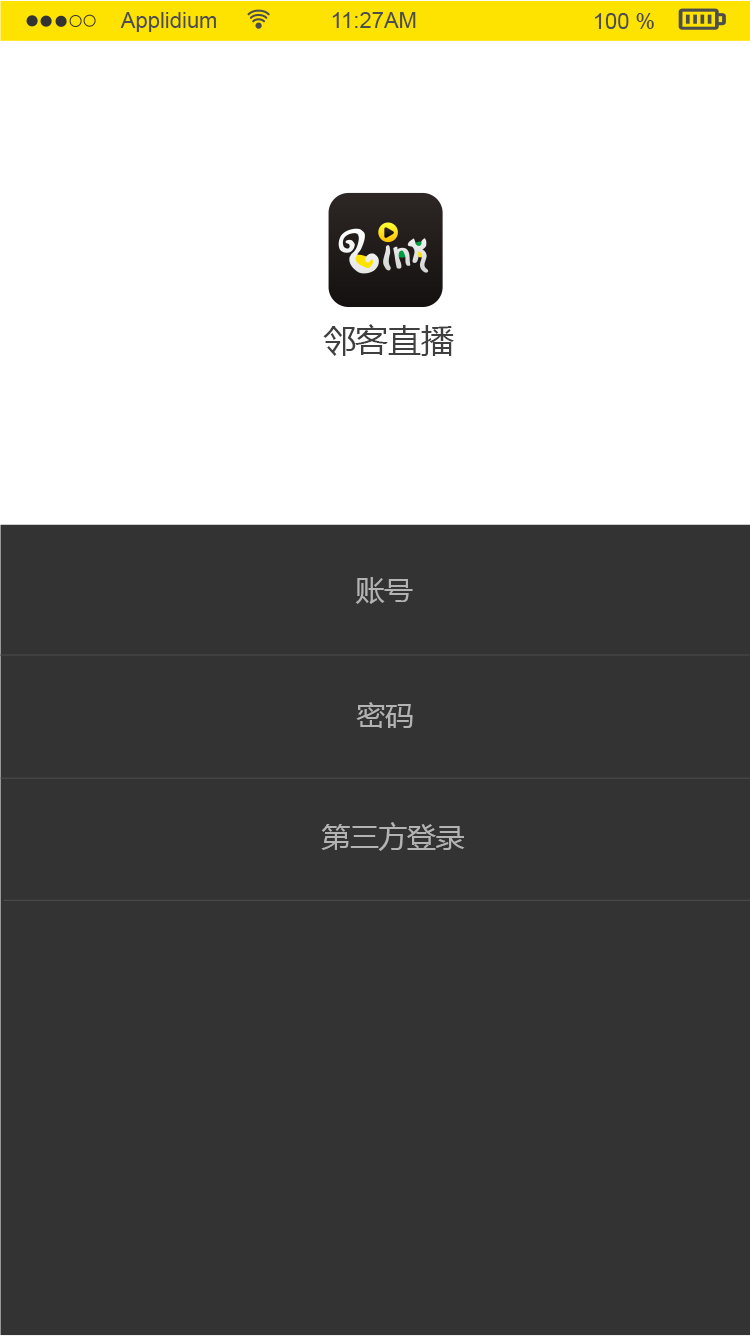
<style>
.page{position:relative;width:750px;height:1336px;background:#333333}
.page>*{position:absolute;margin:0}
.t1{font:22px "ArialMT";color:#4d4d4d}
.t2{font:32px "MicrosoftYaHei";color:#3f3f3f}
.t3{font:28px "MicrosoftYaHei";color:#b3b3b3}
</style>
<div class="page">
<p class="t1" style="left:120px;top:12px;width:96px;height:20px">Applidium</p>
<p class="t1" style="left:332px;top:12px;width:84px;height:16px">11:27AM</p>
<p class="t1" style="left:595px;top:13px;width:59px;height:16px">100 %</p>
<p class="t2" style="left:323px;top:324px;width:131px;height:32px">邻客直播</p>
<p class="t3" style="left:355px;top:577px;width:58px;height:27px">账号</p>
<p class="t3" style="left:356px;top:702px;width:57px;height:26px">密码</p>
<p class="t3" style="left:321px;top:822px;width:144px;height:29px">第三方登录</p>
</div>
